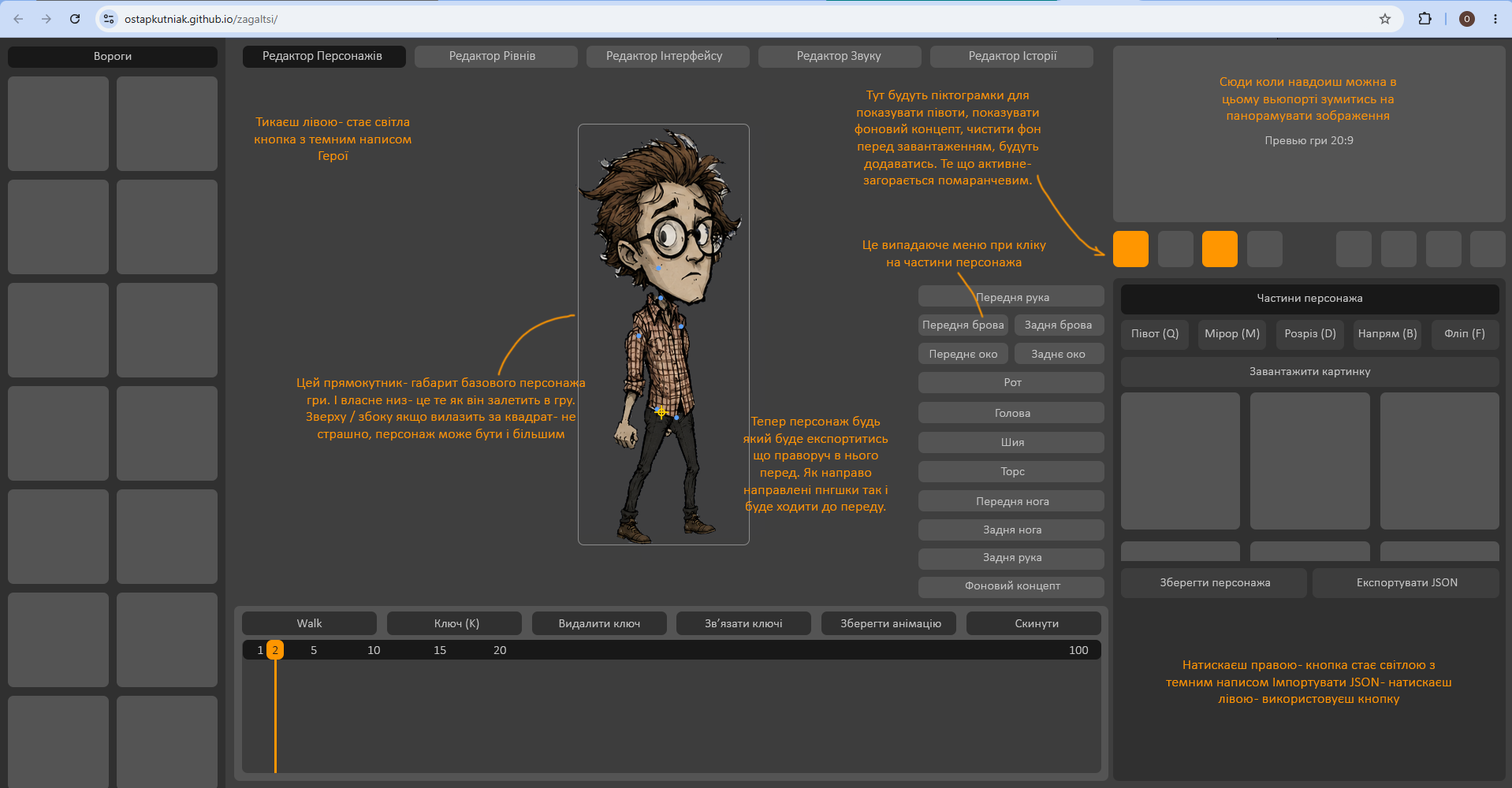
<style>
.page{position:relative;width:1512px;height:788px;background:#3f3f3f}
.page>*{position:absolute;margin:0}
.t1{font:12.6px "Calibri-Light";letter-spacing:0.01em;color:#c6c6c6}
.t2{font:13px "Calibri-Light";letter-spacing:0.01em;color:#c6c6c6}
.t3{font:14.2px "Calibri-Light";letter-spacing:0.01em;color:#ff9600}
.t4{font:12.6px "Calibri-Light";letter-spacing:0.01em;color:#181818}
</style>
<div class="page">
<p class="t1" style="left:95px;top:52px;width:37px;height:10px">Вороги</p>
<p class="t2" style="left:263px;top:51px;width:119px;height:11px">Редактор Персонажів</p>
<p class="t2" style="left:450px;top:51px;width:85px;height:11px">Редактор Рівнів</p>
<p class="t2" style="left:607px;top:50px;width:116px;height:12px">Редактор Інтерфейсу</p>
<p class="t2" style="left:798px;top:51px;width:84px;height:11px">Редактор Звуку</p>
<p class="t2" style="left:970px;top:51px;width:87px;height:11px">Редактор Історії</p>
<p class="t3" style="left:1220px;top:77px;width:176px;height:45px;text-align:center">Сюди коли навдоиш можна в цьому вьюпорті зумитись на панорамувати зображення</p>
<p class="t3" style="left:855px;top:90px;width:186px;height:97px;text-align:center">Тут будуть піктограмки для показувати півоти, показувати фоновий концепт, чистити фон перед завантаженням, будуть додаватись. Те що активне - загорається помаранчевим.</p>
<p class="t3" style="left:255px;top:117px;width:157px;height:45px;text-align:center">Тикаєш лівою - стає світла кнопка з темним написом Герої</p>
<p class="t1" style="left:1266px;top:136px;width:88px;height:11px">Превью гри 20:9</p>
<p class="t3" style="left:863px;top:240px;width:183px;height:29px;text-align:center">Це випадаюче меню при кліку на частини персонажа</p>
<p class="t1" style="left:977px;top:293px;width:72px;height:11px">Передня рука</p>
<p class="t1" style="left:1258px;top:294px;width:104px;height:10px">Частини персонажа</p>
<p class="t1" style="left:923px;top:320px;width:81px;height:11px">Передня брова</p>
<p class="t1" style="left:1025px;top:320px;width:67px;height:11px">Задня брова</p>
<p class="t1" style="left:1132px;top:329px;width:47px;height:11px">Півот (Q)</p>
<p class="t1" style="left:1206px;top:329px;width:54px;height:11px">Мірор (M)</p>
<p class="t1" style="left:1285px;top:329px;width:51px;height:11px">Розріз (D)</p>
<p class="t1" style="left:1359px;top:329px;width:58px;height:11px">Напрям (B)</p>
<p class="t1" style="left:1445px;top:329px;width:40px;height:11px">Фліп (F)</p>
<p class="t1" style="left:930px;top:350px;width:67px;height:10px">Переднє око</p>
<p class="t1" style="left:1032px;top:350px;width:54px;height:10px">Заднє око</p>
<p class="t3" style="left:297px;top:378px;width:288px;height:63px;text-align:center">Цей прямокутник - габарит базового персонажа гри. І власне низ - це те як він залетить в гру. Зверху / збоку якщо вилазить за квадрат - не страшно, персонаж може бути і більшим</p>
<p class="t1" style="left:1251px;top:367px;width:120px;height:11px">Завантажити картинку</p>
<p class="t1" style="left:1005px;top:378px;width:17px;height:8px">Рот</p>
<p class="t1" style="left:996px;top:409px;width:35px;height:8px">Голова</p>
<p class="t3" style="left:744px;top:416px;width:145px;height:97px;text-align:center">Тепер персонаж будь який буде експортитись що праворуч в нього перед. Як направо направлені пнгшки так і буде ходити до переду.</p>
<p class="t1" style="left:1002px;top:438px;width:22px;height:8px">Шия</p>
<p class="t1" style="left:1001px;top:468px;width:24px;height:10px">Торс</p>
<p class="t1" style="left:977px;top:498px;width:72px;height:10px">Передня нога</p>
<p class="t1" style="left:984px;top:526px;width:58px;height:10px">Задня нога</p>
<p class="t1" style="left:984px;top:554px;width:58px;height:10px">Задня рука</p>
<p class="t1" style="left:965px;top:581px;width:96px;height:11px">Фоновий концепт</p>
<p class="t1" style="left:1161px;top:578px;width:109px;height:11px">Зберегти персонажа</p>
<p class="t1" style="left:1358px;top:579px;width:100px;height:10px">Експортувати JSON</p>
<p class="t1" style="left:297px;top:619px;width:25px;height:9px">Walk</p>
<p class="t1" style="left:435px;top:619px;width:44px;height:11px">Ключ (K)</p>
<p class="t1" style="left:559px;top:620px;width:81px;height:10px">Видалити ключ</p>
<p class="t1" style="left:706px;top:619px;width:76px;height:9px">Зв’язати ключі</p>
<p class="t1" style="left:841px;top:619px;width:100px;height:11px">Зберегти анімацію</p>
<p class="t1" style="left:1016px;top:620px;width:43px;height:10px">Скинути</p>
<p class="t1" style="left:258px;top:647px;width:5px;height:7px">1</p>
<p class="t4" style="left:273px;top:647px;width:5px;height:7px">2</p>
<p class="t1" style="left:311px;top:647px;width:6px;height:7px">5</p>
<p class="t1" style="left:368px;top:647px;width:12px;height:7px">10</p>
<p class="t1" style="left:434px;top:647px;width:12px;height:7px">15</p>
<p class="t1" style="left:494px;top:647px;width:12px;height:7px">20</p>
<p class="t1" style="left:1070px;top:647px;width:19px;height:7px">100</p>
<p class="t3" style="left:1166px;top:661px;width:286px;height:45px;text-align:center">Натискаєш правою - кнопка стає світлою з темним написом Імпортувати JSON - натискаєш лівою - використовуєш кнопку</p>
</div>
